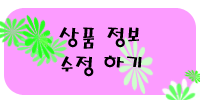
<style>
.page{position:relative;width:200px;height:100px;background:#fc9cff}
.page>*{position:absolute;margin:0}
.t1{font:24px "MagicR-HM";color:#000000}
</style>
<div class="page">
<p class="t1" style="left:59px;top:27px;width:83px;height:50px">상품 정보 <br>   수정 하기</p>
</div>
